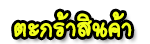
<style>
.page{position:relative;width:150px;height:44px;background:#ffffff}
.page>*{position:absolute;margin:0}
.t1{font:39.6px "2005_iannnnnMTV";color:#f2ff1b}
</style>
<div class="page">
<p class="t1" style="left:14px;top:11px;width:118px;height:27px">ตะกร้าสินค้า</p>
</div>
